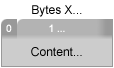
<style>
.page{position:relative;width:114px;height:68px;background:#cccccc}
.page>*{position:absolute;margin:0}
.t1{font:12px "ArialMT";color:#000000}
.t2{font:10px "ArialMT";color:#ffffff}
</style>
<div class="page">
<p class="t1" style="left:32px;top:5px;width:50px;height:12px">Bytes X...</p>
<p class="t2" style="left:6px;top:24px;width:6px;height:8px">0</p>
<p class="t2" style="left:49px;top:24px;width:16px;height:8px">1 ...</p>
<p class="t1" style="left:31px;top:47px;width:51px;height:10px">Content...</p>
</div>
